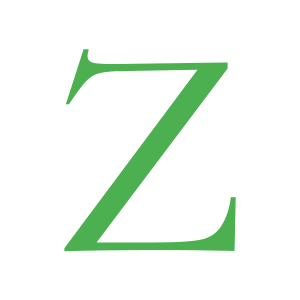
<style>
.page{position:relative;width:300px;height:300px;background:#ffffff}
.page>*{position:absolute;margin:0}
.t1{font:300px "STKaiti";color:#4caf50}
</style>
<div class="page">
<p class="t1" style="left:64px;top:49px;width:172px;height:203px">Z</p>
</div>
